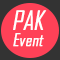
<style>
.page{position:relative;width:60px;height:60px;background:#ff4157}
.page>*{position:absolute;margin:0}
.t1{font:25.5px "AgencyFB-Reg";letter-spacing:-0.02em;color:#fefefe;text-transform:uppercase;font-weight:bold;font-style:italic}
.t2{font:17px "AgencyFB-Reg";letter-spacing:-0.02em;color:#fefefe;font-weight:bold;font-style:italic}
</style>
<div class="page">
<p class="t1" style="left:13px;top:10px;width:34px;height:20px">Pak</p>
<p class="t2" style="left:13px;top:33px;width:31px;height:14px">Event</p>
</div>
